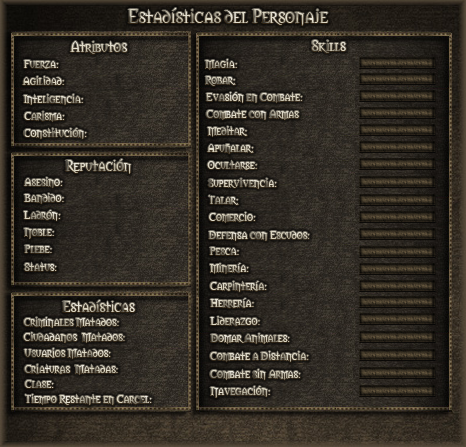
<style>
.page{position:relative;width:466px;height:447px}
.page>*{position:absolute;margin:0}
.t1{font:18px "Morpheus"}
.t2{font:14px "Morpheus"}
.t3{font:11px "Morpheus"}
.t4{font:11px "Morpheus";color:#dbd6c2}
</style>
<div class="page">
<p class="t1" style="left:128px;top:8px;width:200px;height:18px">Estadísticas del Personaje</p>
<p class="t2" style="left:70px;top:41px;width:57px;height:13px">Atributos</p>
<p class="t2" style="left:312px;top:40px;width:34px;height:13px">Skills</p>
<p class="t3" style="left:24px;top:60px;width:35px;height:9px">Fuerza:</p>
<p class="t3" style="left:205px;top:59px;width:32px;height:11px">Magia:</p>
<p class="t3" style="left:22px;top:76px;width:42px;height:9px">Agilidad:</p>
<p class="t3" style="left:205px;top:76px;width:31px;height:10px">Robar:</p>
<p class="t3" style="left:23px;top:94px;width:60px;height:11px">Inteligencia:</p>
<p class="t3" style="left:206px;top:92px;width:97px;height:11px">Evasión en Combate:</p>
<p class="t3" style="left:24px;top:111px;width:41px;height:11px">Carisma:</p>
<p class="t3" style="left:206px;top:109px;width:93px;height:11px">Combate con Armas</p>
<p class="t3" style="left:207px;top:126px;width:41px;height:11px">Meditar:</p>
<p class="t3" style="left:23px;top:128px;width:64px;height:11px">Constitución:</p>
<p class="t4" style="left:207px;top:144px;width:47px;height:10px">Apuñalar:</p>
<p class="t2" style="left:65px;top:159px;width:66px;height:15px">Reputación</p>
<p class="t3" style="left:207px;top:160px;width:50px;height:10px">Ocultarse:</p>
<p class="t3" style="left:24px;top:177px;width:39px;height:11px">Asesino:</p>
<p class="t3" style="left:208px;top:178px;width:69px;height:11px">Supervivencia:</p>
<p class="t3" style="left:24px;top:193px;width:40px;height:11px">Bandido:</p>
<p class="t3" style="left:208px;top:195px;width:31px;height:10px">Talar:</p>
<p class="t3" style="left:23px;top:210px;width:38px;height:11px">Ladrón:</p>
<p class="t3" style="left:209px;top:212px;width:47px;height:11px">Comercio:</p>
<p class="t3" style="left:24px;top:228px;width:30px;height:11px">Noble:</p>
<p class="t3" style="left:208px;top:231px;width:102px;height:10px">Defensa con Escudos:</p>
<p class="t3" style="left:24px;top:245px;width:28px;height:8px">Plebe:</p>
<p class="t3" style="left:209px;top:247px;width:30px;height:8px">Pesca:</p>
<p class="t3" style="left:24px;top:262px;width:33px;height:9px">Status:</p>
<p class="t3" style="left:210px;top:263px;width:39px;height:11px">Minería:</p>
<p class="t3" style="left:210px;top:281px;width:57px;height:11px">Carpintería:</p>
<p class="t2" style="left:62px;top:300px;width:73px;height:12px">Estadísticas</p>
<p class="t3" style="left:210px;top:298px;width:44px;height:10px">Herrería:</p>
<p class="t3" style="left:23px;top:317px;width:96px;height:11px">Criminales Matados:</p>
<p class="t3" style="left:210px;top:316px;width:50px;height:10px">Liderazgo:</p>
<p class="t3" style="left:23px;top:332px;width:102px;height:11px">Ciudadanos  Matados:</p>
<p class="t3" style="left:210px;top:333px;width:80px;height:11px">Domar Animales:</p>
<p class="t3" style="left:24px;top:348px;width:87px;height:11px">Usuarios Matados:</p>
<p class="t3" style="left:210px;top:351px;width:99px;height:11px">Combate a Distancia:</p>
<p class="t3" style="left:24px;top:364px;width:94px;height:11px">Criaturas  Matadas:</p>
<p class="t3" style="left:210px;top:369px;width:91px;height:11px">Combate sin Armas:</p>
<p class="t3" style="left:24px;top:380px;width:30px;height:8px">Clase:</p>
<p class="t3" style="left:210px;top:386px;width:60px;height:12px">Navegación:</p>
<p class="t3" style="left:25px;top:394px;width:127px;height:11px">Tiempo Restante en Carcel:</p>
</div>
